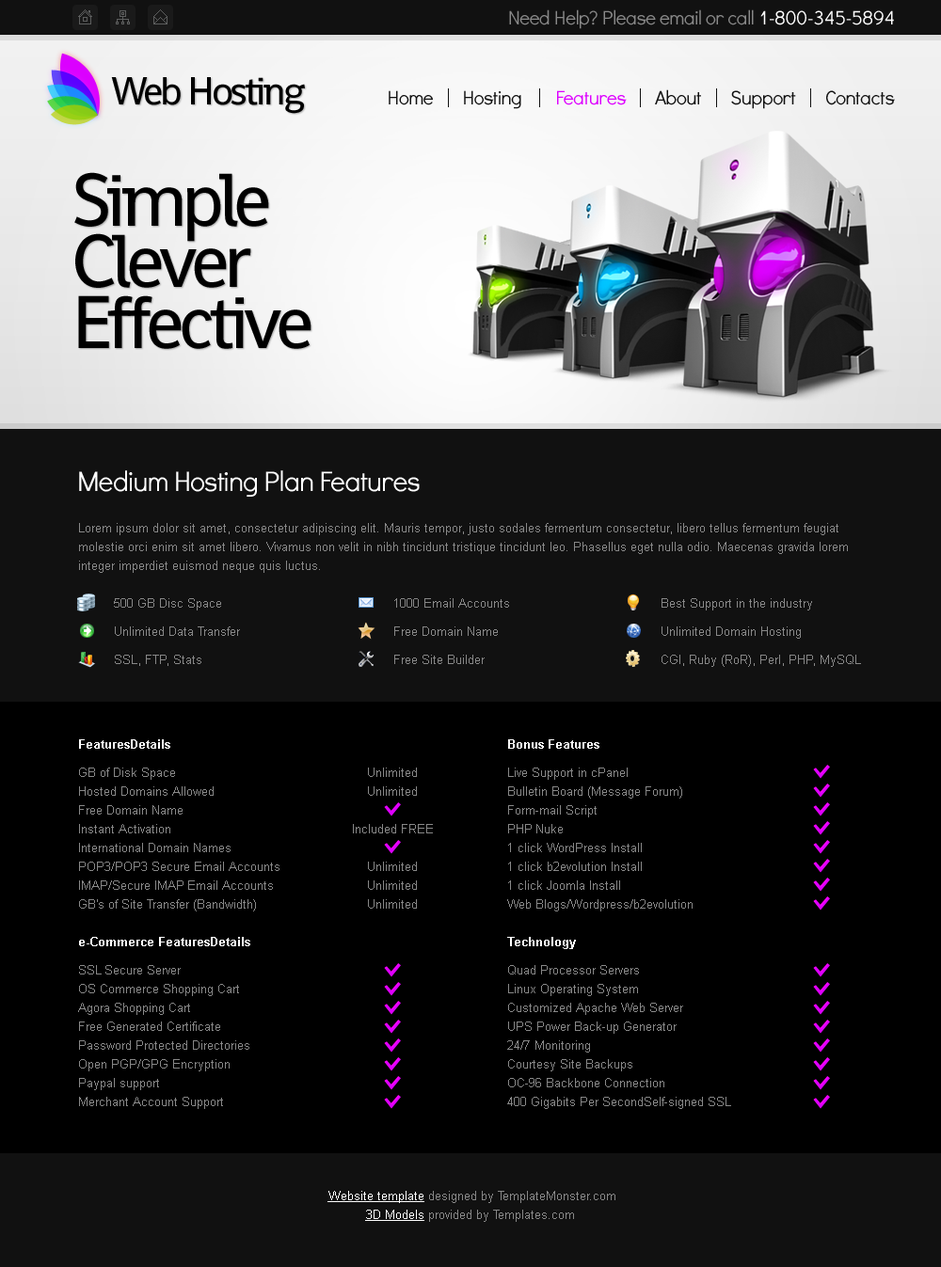
<style>
.page{position:relative;width:941px;height:1267px;background:#000000}
.page>*{position:absolute;margin:0}
.t1{font:19.8px "DidactGothic";letter-spacing:-0.025em;color:#888888}
.t2{font:19.8px "DidactGothic";letter-spacing:-0.025em;color:#ffffff}
.t3{font:39.5px "Shanti";letter-spacing:-0.075em;color:#000000}
.t4{font:19.8px "DidactGothic";letter-spacing:-0.025em;color:#111111}
.t5{font:19.8px "DidactGothic";letter-spacing:-0.025em;color:#dd00ff}
.t6{font:75.3px/61.2px "Shanti";letter-spacing:-0.075em;color:#000000}
.t7{font:28.2px "DidactGothic";letter-spacing:-0.025em;color:#ffffff}
.t8{font:12.2px/18.8px "ArialMT";color:#888888}
.t9{font:12.2px/28.2px "ArialMT";color:#888888}
.t10{font:12.2px/18.8px "Arial-BoldMT";color:#ffffff}
.t11{font:12.2px/18.8px "ArialMT";color:#ffffff}
.t12{font:12.2px/18.8px "ArialMT";color:#ffffff;text-decoration:underline}
</style>
<div class="page">
<p class="t1" style="left:509px;top:9px;width:385px;height:20px">Need Help? Please email or call <span class="t2">1-800-345-5894</span></p>
<p class="t3" style="left:111px;top:77px;width:194px;height:37px">Web Hosting</p>
<p class="t4" style="left:389px;top:89px;width:506px;height:20px">Home       Hosting        <span class="t5">Features</span>       About       Support       Contacts</p>
<p class="t6" style="left:74px;top:172px;width:237px;height:177px">Simple<br>Clever<br>Effective</p>
<p class="t7" style="left:79px;top:470px;width:341px;height:27px">Medium Hosting Plan Features</p>
<p class="t8" style="left:79px;top:523px;width:769px;height:143px">Lorem ipsum dolor sit amet, consectetur adipiscing elit. Mauris tempor, justo sodales fermentum consectetur, libero tellus fermentum feugiat molestie orci enim sit amet libero. Vivamus non velit in nibh tincidunt tristique tincidunt leo. Phasellus eget nulla odio. Maecenas gravida lorem integer imperdiet euismod neque quis luctus.<br><br>500 GB Disc Space<br><span class="t9">Unlimited Data Transfer<br>SSL, FTP, Stats<br><br></span>Donec facilisis lobortis viverra. Quisque vehicula suscipit posuere. Nam non lacus dui, gravida condimentum tortor. Maecenas ultrices volutpat euismod. Nam pellentesque imperdiet urna, quis adipiscing nunc blandit non. Maecenas imperdiet ultricies dolor cursus accumsan. Quisque id tempor sem. In at sem non lacus euismod aliquet in nec nisl. Donec dolor sapien, fringilla a congue id, congue nec enim. Nulla ultricies arcu et eros tempus in facilisis odio auctor. Duis nec dui ut metus elementum ullamcorper venenatis quis nunc.</p>
<p class="t9" style="left:394px;top:598px;width:115px;height:66px">1000 Email Accounts<br>Free Domain Name<br>Free Site Builder</p>
<p class="t9" style="left:661px;top:598px;width:200px;height:69px">Best Support in the industry<br>Unlimited Domain Hosting<br>CGI, Ruby (RoR), Perl, PHP, MySQL</p>
<p class="t8" style="left:78px;top:740px;width:201px;height:369px"><span class="t10">FeaturesDetails<br></span><span class="t9">G</span>B of Disk Space<br>Hosted Domains Allowed<br>Free Domain Name<br>Instant Activation<br>International Domain Names<br>POP3/POP3 Secure Email Accounts<br>IMAP/Secure IMAP Email Accounts<br>GB's of Site Transfer (Bandwidth)<br><br><span class="t10">e-Commerce FeaturesDetails<br></span><span class="t9">S</span>SL Secure Server <br>OS Commerce Shopping Cart <br>Agora Shopping Cart <br>Free Generated Certificate <br>Password Protected Directories <br>Open PGP/GPG Encryption <br>Paypal support <br>Merchant Account Support <br>Self-signed SSL</p>
<p class="t8" style="left:507px;top:740px;width:224px;height:369px"><span class="t10">Bonus Features<br></span><span class="t9">L</span>ive Support in cPanel <br>Bulletin Board (Message Forum) <br>Form-mail Script <br>PHP Nuke <br>1 click WordPress Install <br>1 click b2evolution Install <br>1 click Joomla Install <br>Web Blogs/Wordpress/b2evolution<br><br><span class="t10">Technology<br></span><span class="t9">Q</span>uad Processor Servers <br>Linux Operating System <br>Customized Apache Web Server <br>UPS Power Back-up Generator <br>24/7 Monitoring <br>Courtesy Site Backups <br>OC-96 Backbone Connection <br>400 Gigabits Per SecondSelf-signed SSL</p>
<p class="t8" style="left:353px;top:768px;width:80px;height:141px;text-align:center">Unlimited<br>Unlimited<br><br>Included FREE<br><br>Unlimited<br>Unlimited<br>Unlimited</p>
<p class="t8" style="left:327px;top:1191px;width:288px;height:31px;text-align:center"><span class="t11"> </span><span class="t12">Website template</span> designed by TemplateMonster.com<br><span class="t12">3D Models</span> provided by Templates.com</p>
</div>
